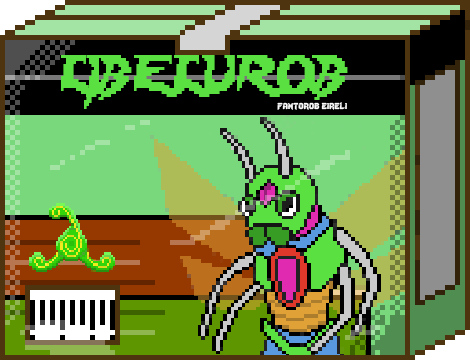
<style>
.page{position:relative;width:470px;height:360px}
.page>*{position:absolute;margin:0}
.t1{font:48px "Lady-Radical";color:#5be041;scale:0.84 1}
.t2{font:12px "Lady-Radical";color:#fbfbfb}
</style>
<div class="page">
<p class="t1" style="left:61px;top:55px;width:287px;height:54px">LIBELUROB</p>
<p class="t2" style="left:277px;top:102px;width:70px;height:8px">fantorob eireli</p>
</div>
